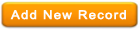
<style>
.page{position:relative;width:140px;height:30px}
.page>*{position:absolute;margin:0}
.t1{font:12px "ArialMT";letter-spacing:0.075em;color:#fdfcfe;font-weight:bold;scale:1.08 1}
</style>
<div class="page">
<p class="t1" style="left:10px;top:10px;width:116px;height:10px">Add New Record</p>
</div>
